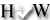
<style>
.page{position:relative;width:50px;height:20px;background:#ffffff}
.page>*{position:absolute;margin:0}
.t1{font:33.3px "Times-Roman";color:#000000;font-variant:small-caps}
</style>
<div class="page">
<p class="t1" style="left:0px;top:4px;width:14px;height:14px">H</p>
<p class="t1" style="left:32px;top:4px;width:19px;height:13px">W</p>
</div>
